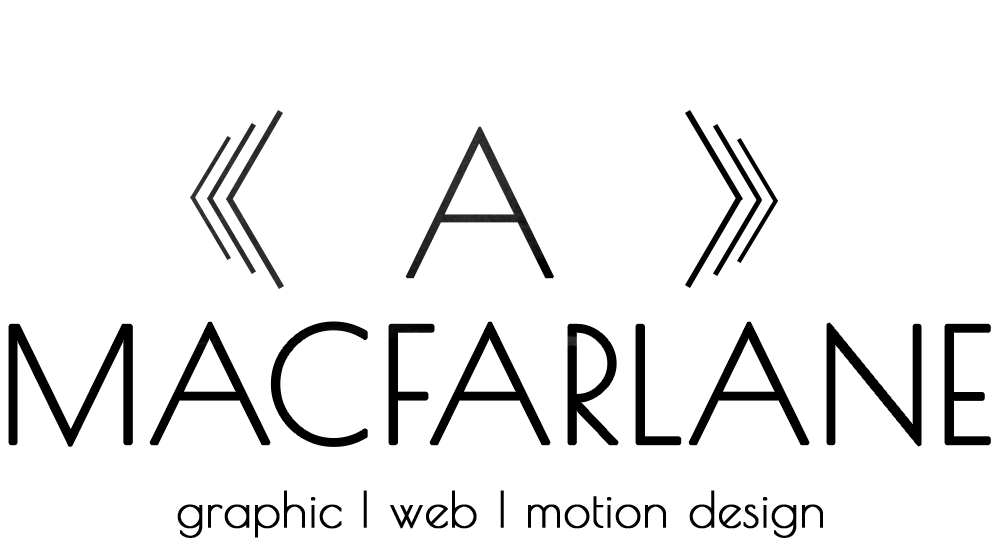
<style>
.page{position:relative;width:1000px;height:550px;background:#ffffff}
.page>*{position:absolute;margin:0}
.t1{font:195.4px "PoiretOne-Regular";color:#272727;font-weight:bold}
.t2{font:156.5px "PoiretOne-Regular";color:#000000;font-weight:bold}
.t3{font:48.9px "PoiretOne-Regular";color:#000000;font-weight:bold}
</style>
<div class="page">
<p class="t1" style="left:405px;top:126px;width:149px;height:153px">A</p>
<p class="t2" style="left:9px;top:322px;width:981px;height:124px">MACFARLANE</p>
<p class="t3" style="left:177px;top:490px;width:646px;height:48px">graphic | web | motion design</p>
</div>
